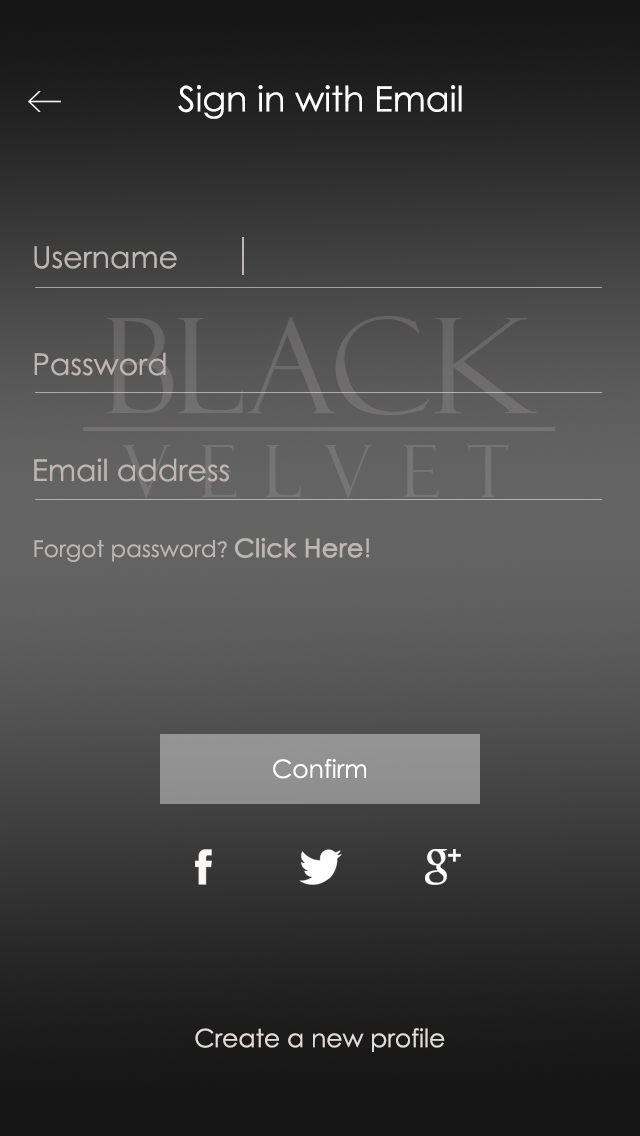
<style>
.page{position:relative;width:640px;height:1136px}
.page>*{position:absolute;margin:0}
.t1{font:35px "CenturyGothic";color:#ffffff}
.t2{font:30px "CenturyGothic";color:#bdb6b6}
.t3{font:131.6px "FelixTitlingMT";color:#6d6c6c}
.t4{font:71.7px "FelixTitlingMT";letter-spacing:0.4em;color:#777575}
.t5{font:23px "CenturyGothic";color:#bdb6b6}
.t6{font:23px "CopperplateGothic-Light";color:#bdb6b6}
.t7{font:25px "CenturyGothic";color:#bdb6b6;font-weight:bold}
.t8{font:25px "CenturyGothic";color:#bdb6b6}
.t9{font:25px "CenturyGothic";color:#ffffff}
.t10{font:25px "CenturyGothic";color:#e1dada}
</style>
<div class="page">
<p class="t1" style="left:178px;top:85px;width:284px;height:34px">Sign in with Email</p>
<p class="t2" style="left:34px;top:246px;width:143px;height:23px">Username</p>
<p class="t3" style="left:107px;top:316px;width:430px;height:99px">BLACK</p>
<p class="t2" style="left:34px;top:352px;width:132px;height:24px">Password</p>
<p class="t4" style="left:122px;top:443px;width:388px;height:55px">VELVET</p>
<p class="t2" style="left:34px;top:458px;width:195px;height:24px">Email address</p>
<p class="t5" style="left:34px;top:537px;width:336px;height:25px">Forgot password<span class="t6">? </span><span class="t7">Click Here</span><span class="t8">!</span></p>
<p class="t9" style="left:273px;top:759px;width:93px;height:20px">Confirm</p>
<p class="t10" style="left:195px;top:1028px;width:250px;height:24px">Create a new profile</p>
</div>
